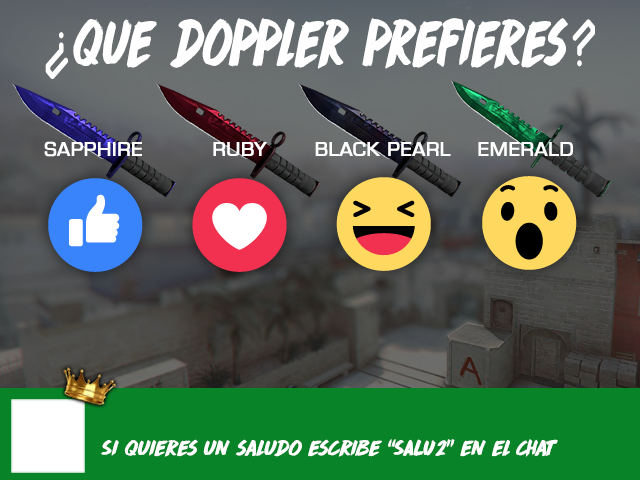
<style>
.page{position:relative;width:640px;height:480px}
.page>*{position:absolute;margin:0}
.t1{font:60px "DKDropDeadGorgeous";letter-spacing:-0.025em;color:#ffffff;scale:0.74 1}
.t2{font:72px "OCRAExtended";letter-spacing:-0.025em;color:#ffffff;scale:0.74 1}
.t3{font:24px "EuroCaps";letter-spacing:-0.025em;color:#ffffff;font-weight:bold}
.t4{font:20px "DKDropDeadGorgeous";letter-spacing:-0.025em;color:#ffffff}
</style>
<div class="page">
<p class="t1" style="left:45px;top:18px;width:550px;height:61px"><span class="t2">¿</span>que doppler prefieres<span class="t2">?</span></p>
<p class="t3" style="left:44px;top:141px;width:98px;height:16px">Sapphire</p>
<p class="t3" style="left:213px;top:142px;width:54px;height:14px">Ruby</p>
<p class="t3" style="left:315px;top:142px;width:136px;height:14px">Black Pearl</p>
<p class="t3" style="left:478px;top:142px;width:95px;height:14px">Emerald</p>
<p class="t4" style="left:101px;top:439px;width:457px;height:18px">Si quieres un saludo escribe “SALU2” en el chat</p>
</div>
